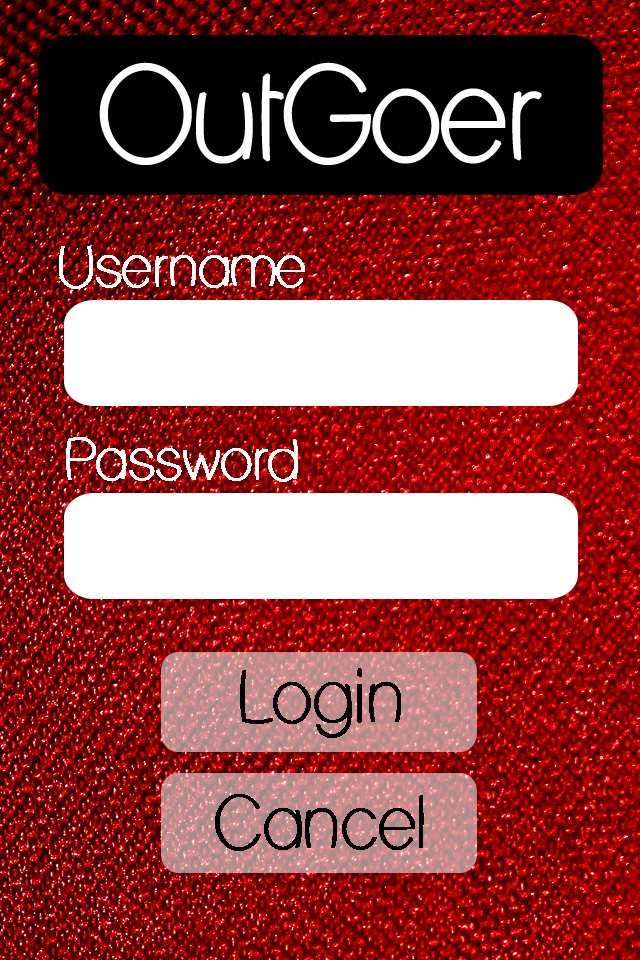
<style>
.page{position:relative;width:640px;height:960px;background:#ffffff}
.page>*{position:absolute;margin:0}
.t1{font:54.2px "LaneHumouresque";color:#ffffff;font-weight:bold}
.t2{font:68.2px "LaneHumouresque";color:#000000;font-weight:bold}
</style>
<div class="page">
<p class="t1" style="left:59px;top:246px;width:246px;height:43px">Username</p>
<p class="t1" style="left:66px;top:437px;width:232px;height:45px">Password</p>
<p class="t2" style="left:240px;top:668px;width:161px;height:70px">Login</p>
<p class="t2" style="left:215px;top:794px;width:209px;height:57px">Cancel</p>
</div>
